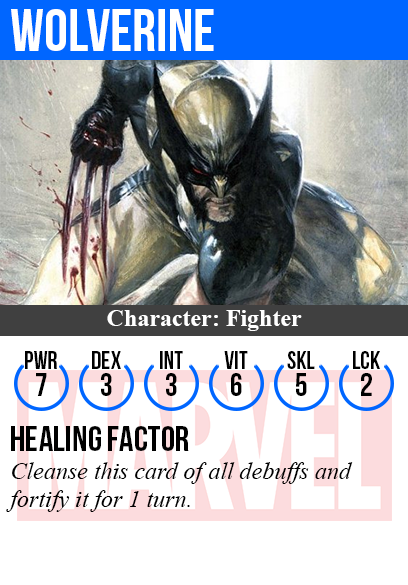
<style>
.page{position:relative;width:408px;height:585px;background:#ffffff}
.page>*{position:absolute;margin:0}
.t1{font:60px "BebasNeue";color:#ffffff}
.t2{font:24px "TimesNewRomanPS-BoldMT";color:#ffffff}
.t3{font:25px "BebasNeue";color:#000000}
.t4{font:32px "BebasNeue";color:#000000}
.t5{font:36px "BebasNeue";color:#000000}
.t6{font:24px "TimesNewRomanPS-ItalicMT";color:#000000}
</style>
<div class="page">
<p class="t1" style="left:11px;top:9px;width:203px;height:42px">wolverine</p>
<p class="t2" style="left:107px;top:310px;width:195px;height:21px">Character: Fighter</p>
<p class="t3" style="left:25px;top:351px;width:32px;height:18px">PWR</p>
<p class="t3" style="left:92px;top:351px;width:29px;height:18px">dex</p>
<p class="t3" style="left:160px;top:351px;width:23px;height:18px">int</p>
<p class="t3" style="left:224px;top:351px;width:24px;height:18px">vit</p>
<p class="t3" style="left:287px;top:351px;width:28px;height:18px">skl</p>
<p class="t3" style="left:353px;top:351px;width:27px;height:18px">lck</p>
<p class="t4" style="left:36px;top:373px;width:11px;height:23px">7</p>
<p class="t4" style="left:101px;top:373px;width:11px;height:23px">3</p>
<p class="t4" style="left:166px;top:373px;width:11px;height:23px">3</p>
<p class="t4" style="left:231px;top:373px;width:11px;height:23px">6</p>
<p class="t4" style="left:296px;top:373px;width:11px;height:23px">5</p>
<p class="t4" style="left:361px;top:373px;width:11px;height:23px">2</p>
<p class="t5" style="left:11px;top:426px;width:178px;height:25px">healing factor</p>
<p class="t6" style="left:6px;top:462px;width:347px;height:50px">Cleanse this card of all debuffs and<br>fortify it for 1 turn.</p>
</div>
